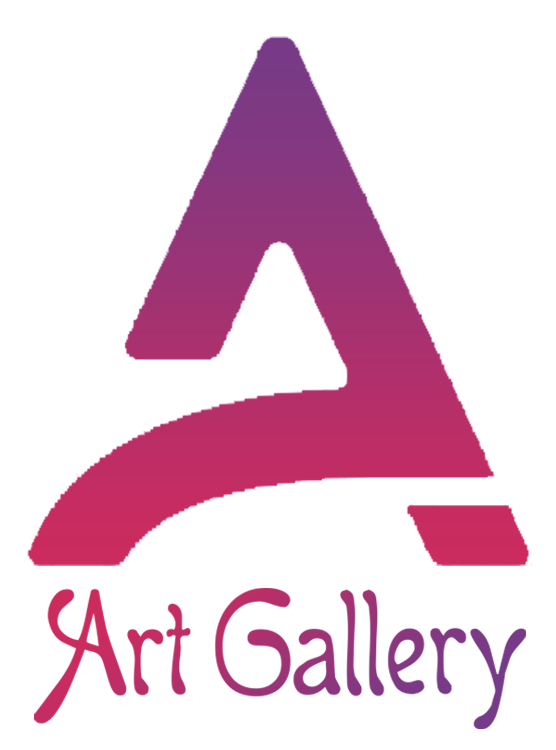
<style>
.page{position:relative;width:556px;height:750px;background:#ffffff}
.page>*{position:absolute;margin:0}
.t1{font:174.9px "Boomerang"}
</style>
<div class="page">
<p class="t1" style="left:34px;top:588px;width:492px;height:141px">Art Gallery</p>
</div>
